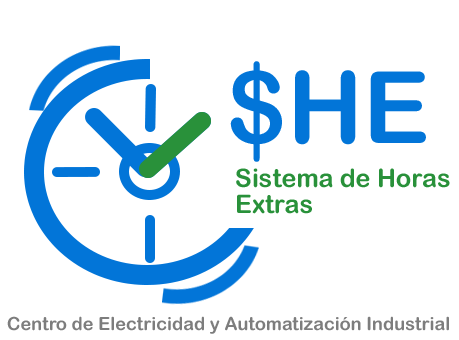
<style>
.page{position:relative;width:459px;height:340px;background:#ffffff}
.page>*{position:absolute;margin:0}
.t1{font:100px "ArialRoundedMTBold";letter-spacing:0.005em;color:#0275d8}
.t2{font:25.5px/26px "ArialRoundedMTBold";letter-spacing:0.005em;color:#29913a}
.t3{font:18.4px "ArialRoundedMTBold";letter-spacing:0.005em;color:#7e7e7e}
</style>
<div class="page">
<p class="t1" style="left:230px;top:61px;width:196px;height:101px">$HE</p>
<p class="t2" style="left:236px;top:168px;width:214px;height:46px;text-align:justify">Sistema de Horas<br>Extras</p>
<p class="t3" style="left:7px;top:316px;width:442px;height:18px">Centro de Electricidad y Automatización Industrial</p>
</div>
